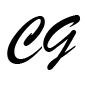
<style>
.page{position:relative;width:85px;height:85px;background:#ffffff}
.page>*{position:absolute;margin:0}
.t1{font:60px "BrushScriptMT";letter-spacing:0.005em;color:#000000}
</style>
<div class="page">
<p class="t1" style="left:7px;top:15px;width:74px;height:55px">CG</p>
</div>
